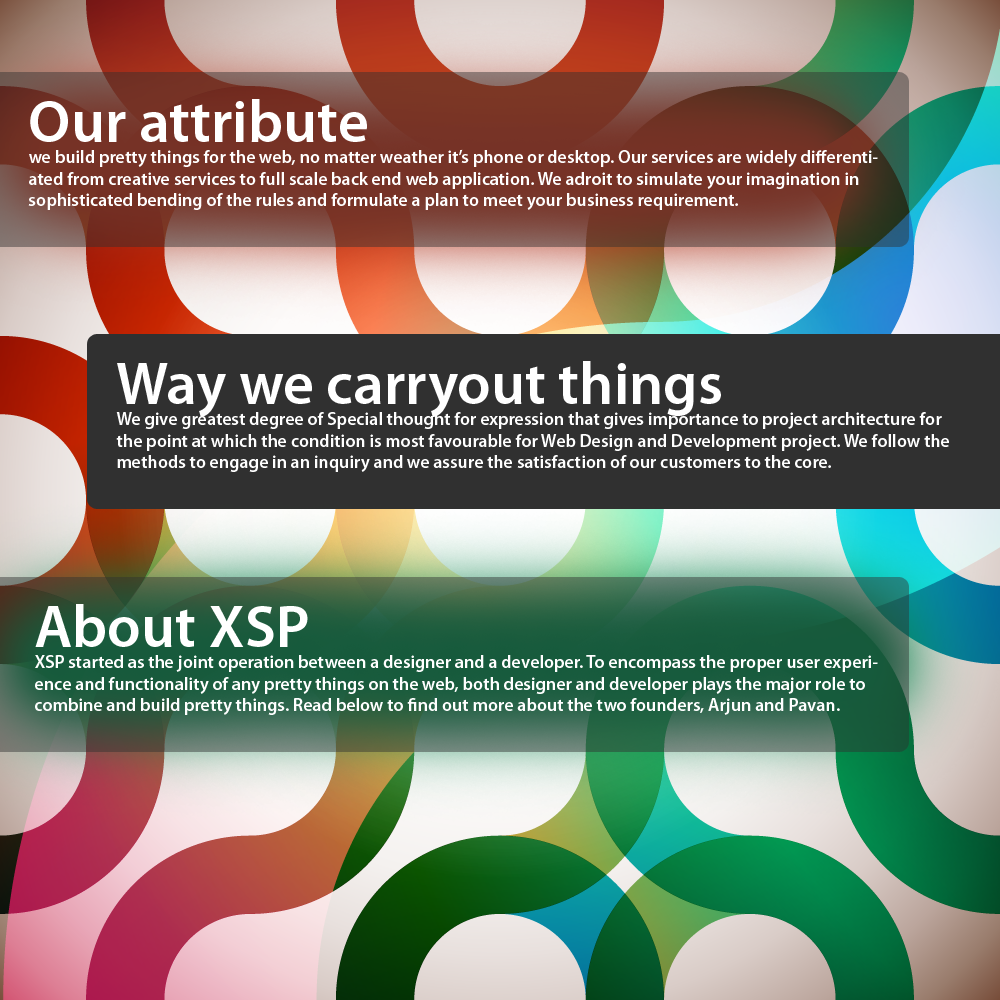
<style>
.page{position:relative;width:1000px;height:1000px}
.page>*{position:absolute;margin:0}
.t1{font:18px "MyriadPro-Semibold";color:#ffffff}
.t2{font:60px "MyriadPro-Semibold";color:#ffffff}
</style>
<div class="page">
<p class="t1" style="left:28px;top:99px;width:850px;height:111px"><span class="t2">Our attribute<br></span>we build pretty things for the web, no matter weather it’s phone or desktop. Our services are widely differentiated from creative services to full scale back end web application. We adroit to simulate your imagination in sophisticated bending of the rules and formulate a plan to meet your business requirement.</p>
<p class="t1" style="left:116px;top:361px;width:833px;height:111px"><span class="t2">Way we carryout things<br></span>We give greatest degree of Special thought for expression that gives importance to project architecture for the point at which the condition is most favourable for Web Design and Development project. We follow the methods to engage in an inquiry and we assure the satisfaction of our customers to the core.</p>
<p class="t1" style="left:35px;top:604px;width:843px;height:111px"><span class="t2">About XSP<br></span>XSP started as the joint operation between a designer and a developer. To encompass the proper user experience and functionality of any pretty things on the web, both designer and developer plays the major role to combine and build pretty things. Read below to find out more about the two founders, Arjun and Pavan.</p>
</div>
